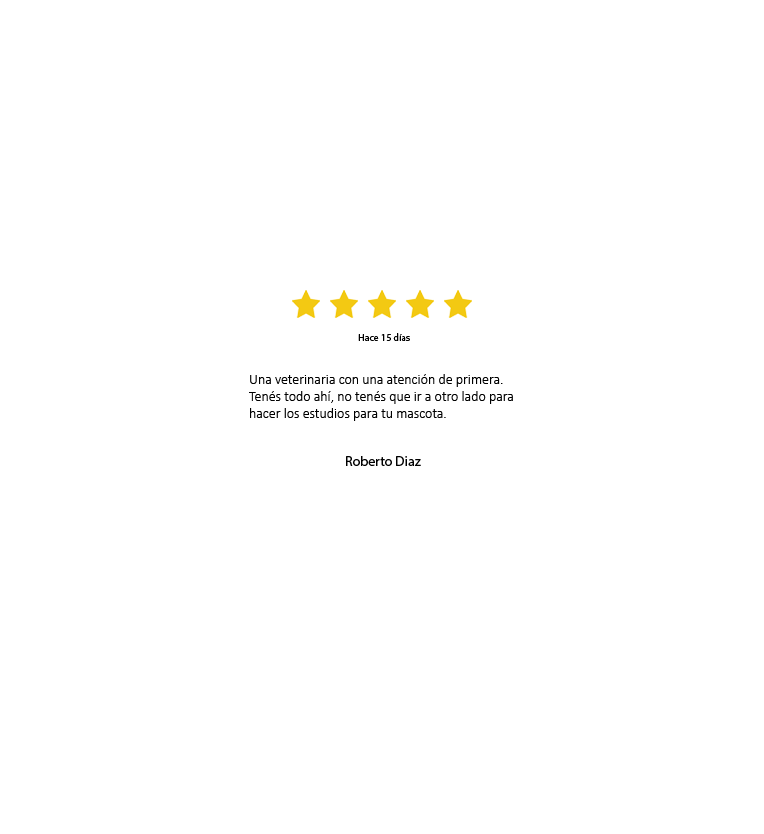
<style>
.page{position:relative;width:764px;height:834px;background:#ffffff}
.page>*{position:absolute;margin:0}
.t1{font:10px "MyriadPro-Regular";color:#000000}
.t2{font:14px "Calibri-Light";color:#000000}
.t3{font:14px "MyriadPro-Regular";color:#000000}
</style>
<div class="page">
<p class="t1" style="left:358px;top:333px;width:52px;height:8px">Hace 15 días</p>
<p class="t2" style="left:249px;top:374px;width:264px;height:47px">Una veterinaria con una atención de primera. <br>Tenés todo ahí, no tenés que ir a otro lado para <br>hacer los estudios para tu mascota.</p>
<p class="t3" style="left:346px;top:456px;width:75px;height:10px">Roberto Diaz</p>
</div>
